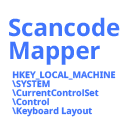
<style>
.page{position:relative;width:128px;height:128px;background:#ffffff}
.page>*{position:absolute;margin:0}
.t1{font:24px/23px "NotoSans-Bold";color:#4175fc}
.t2{font:9px/9px "NotoSans-Bold";color:#4175fc}
</style>
<div class="page">
<p class="t1" style="left:9px;top:17px;width:111px;height:48px">Scancode<br>Mapper</p>
<p class="t2" style="left:12px;top:71px;width:104px;height:46px">HKEY_LOCAL_MACHINE<br>\SYSTEM<br>\CurrentControlSet<br>\Control<br>\Keyboard Layout</p>
</div>
